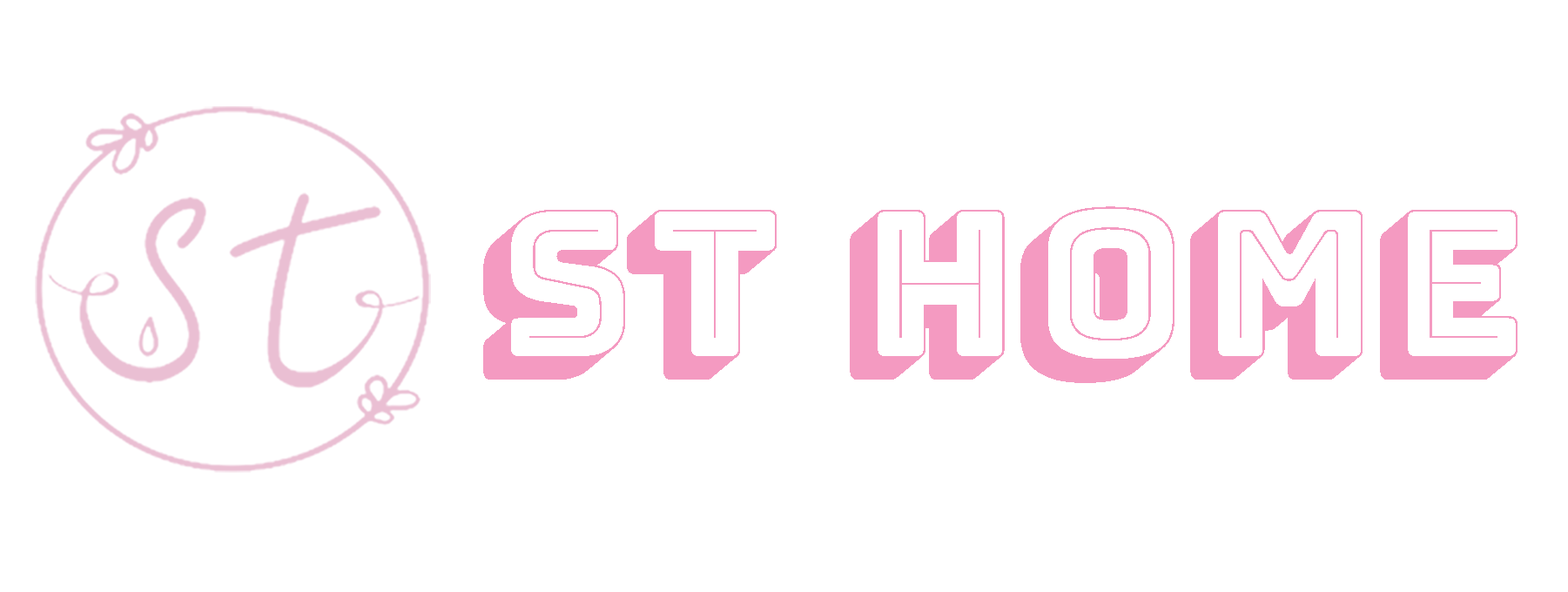
<style>
.page{position:relative;width:1568px;height:592px;background:#ffffff}
.page>*{position:absolute;margin:0}
.t1{font:200.5px "BungeeShade-Regular";color:#f49ac1}
</style>
<div class="page">
<p class="t1" style="left:483px;top:206px;width:1035px;height:177px">ST home</p>
</div>
